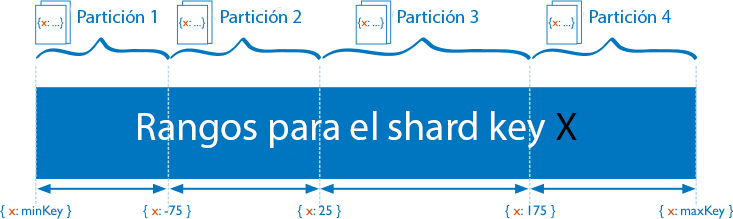
<style>
.page{position:relative;width:733px;height:219px;background:#ffffff}
.page>*{position:absolute;margin:0}
.t1{font:18.7px "MyriadPro-Regular";color:#0176c0}
.t2{font:40px "MyriadPro-Regular";color:#ffffff}
.t3{font:40px "MyriadPro-Regular";color:#000000}
</style>
<div class="page">
<p class="t1" style="left:78px;top:10px;width:78px;height:13px">Partición 1</p>
<p class="t1" style="left:221px;top:10px;width:80px;height:13px">Partición 2</p>
<p class="t1" style="left:398px;top:10px;width:80px;height:13px">Partición 3</p>
<p class="t1" style="left:590px;top:10px;width:81px;height:13px">Partición 4</p>
<p class="t2" style="left:138px;top:111px;width:439px;height:38px">Rangos para el shard key <span class="t3">X</span></p>
</div>
